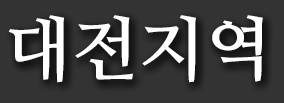
<style>
.page{position:relative;width:284px;height:103px;background:#333333}
.page>*{position:absolute;margin:0}
.t1{font:70px "NanumMyeongjoBold";color:#ffffff}
</style>
<div class="page">
<p class="t1" style="left:8px;top:15px;width:255px;height:68px">대전지역</p>
</div>
